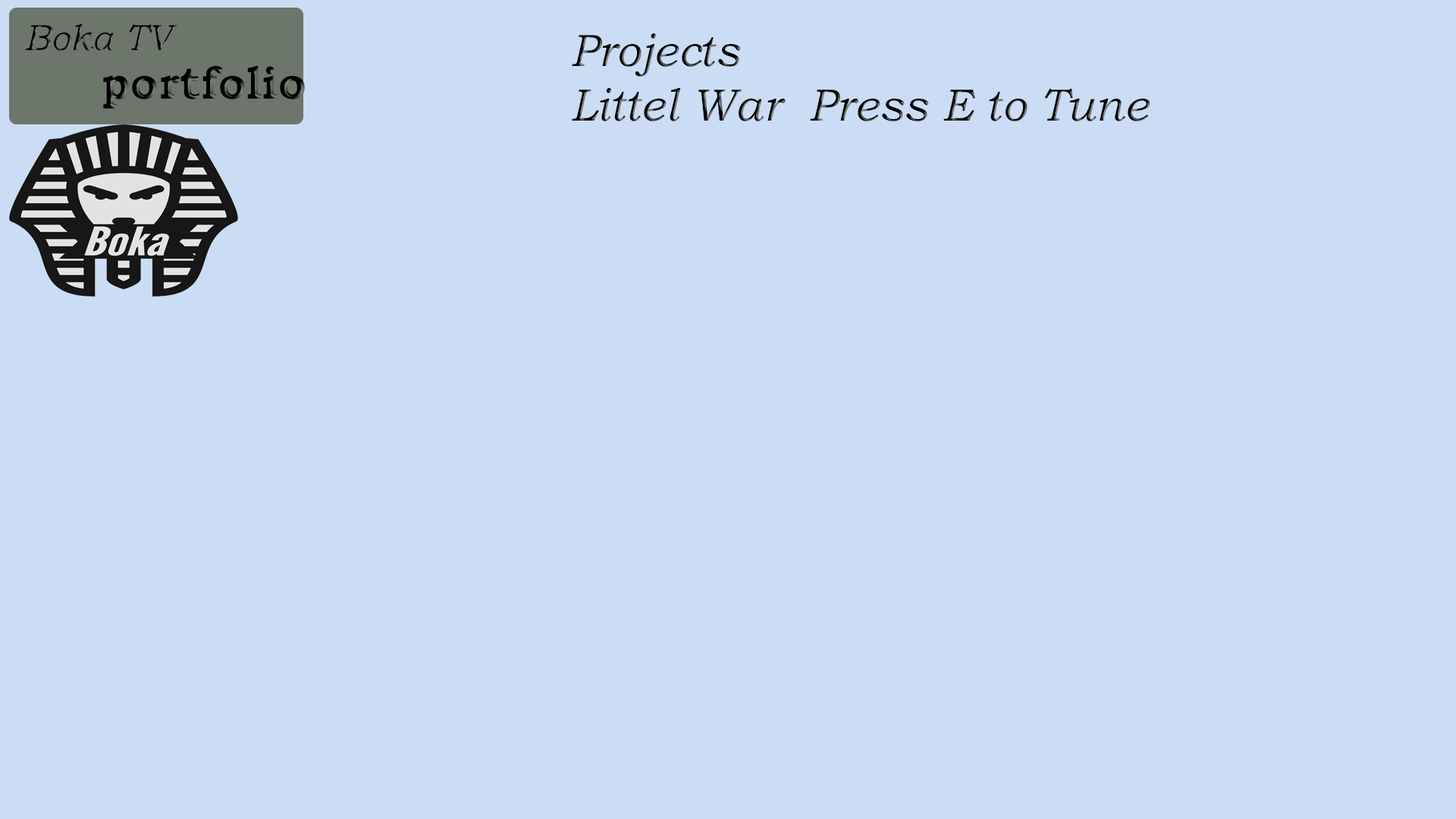
<style>
.page{position:relative;width:1456px;height:819px;background:#caddf5}
.page>*{position:absolute;margin:0}
.t1{font:36.4px "BookmanOldStyle-Italic"}
.t2{font:45.5px "BookmanOldStyle-Italic"}
.t3{font:45.5px "BookmanOldStyle-Bold"}
</style>
<div class="page">
<p class="t1" style="left:25px;top:24px;width:152px;height:27px">Boka TV</p>
<p class="t2" style="left:572px;top:33px;width:578px;height:88px">Projects <br>Littel War  Press E to Tune</p>
<p class="t3" style="left:103px;top:66px;width:202px;height:42px">portfolio</p>
</div>
